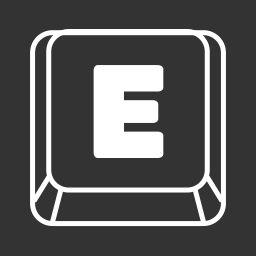
<style>
.page{position:relative;width:256px;height:256px;background:#333333}
.page>*{position:absolute;margin:0}
.t1{font:123.8px "Goma-Block";color:#ffffff}
</style>
<div class="page">
<p class="t1" style="left:93px;top:65px;width:71px;height:93px">E</p>
</div>
